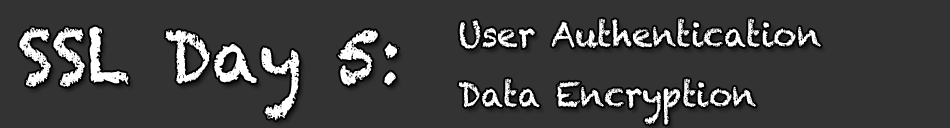
<style>
.page{position:relative;width:950px;height:128px;background:#333333}
.page>*{position:absolute;margin:0}
.t1{font:72px "Chalkduster";letter-spacing:-0.01em;color:#ffffff;scale:0.97 1}
.t2{font:34px/15px "Chalkduster";letter-spacing:-0.01em;color:#ffffff;scale:0.97 1}
</style>
<div class="page">
<p class="t1" style="left:19px;top:26px;width:380px;height:95px">SSL Day 5:</p>
<p class="t2" style="left:458px;top:18px;width:363px;height:107px">User Authentication<br><br><br><br>Data Encryption</p>
</div>
